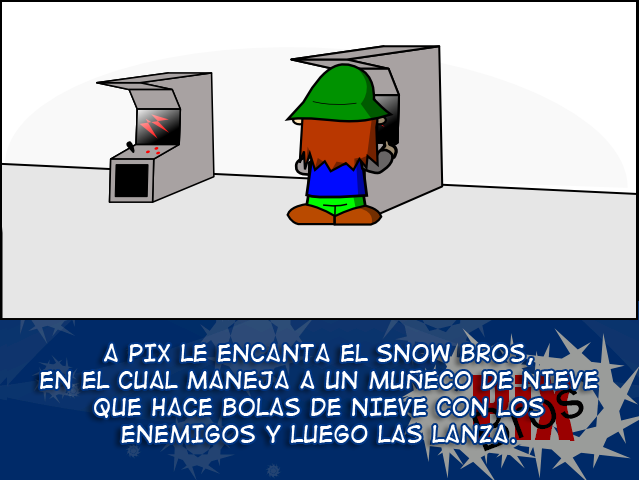
<style>
.page{position:relative;width:639px;height:480px;background:#e6e6e6}
.page>*{position:absolute;margin:0}
.t1{font:22.4px "DigitalStrip2";color:#ffffff}
</style>
<div class="page">
<p class="t1" style="left:40px;top:343px;width:558px;height:101px;text-align:center">A PiX le encanta el Snow Bros, <br>en el cual maneja a un muñeco de nieve que hace bolas de nieve con los <br>enemigos y luego las lanza.</p>
</div>
